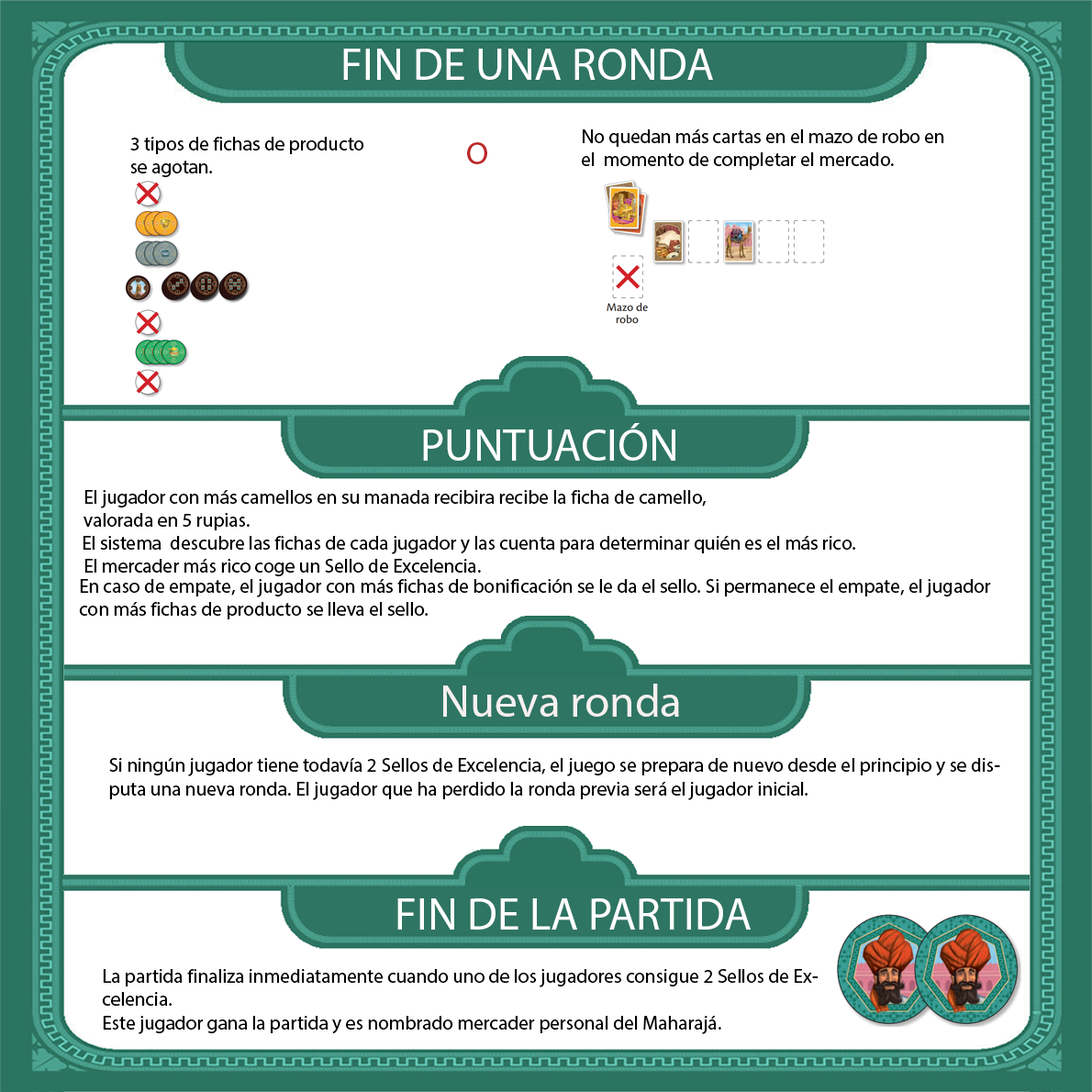
<style>
.page{position:relative;width:1092px;height:1092px;background:#ffffff}
.page>*{position:absolute;margin:0}
.t1{font:45.3px "MyriadHebrew-Regular";color:#ffffff}
.t2{font:19.4px "MyriadHebrew-Regular";color:#010101}
.t3{font:19.4px "MyriadHebrew-Regular";color:#000000}
.t4{font:32.4px "MyriadHebrew-Regular";color:#bd2727}
.t5{font:45.3px "MyriadHebrew-Regular";color:#f6f0f0}
</style>
<div class="page">
<p class="t1" style="left:343px;top:49px;width:370px;height:31px">FIN DE UNA RONDA</p>
<p class="t2" style="left:130px;top:137px;width:234px;height:40px;text-align:right">3 tipos de fichas de producto se agotan.</p>
<p class="t3" style="left:582px;top:129px;width:362px;height:41px;text-align:right">No quedan más cartas en el mazo de robo en el  momento de completar el mercado.</p>
<p class="t4" style="left:467px;top:142px;width:20px;height:22px">O</p>
<p class="t1" style="left:423px;top:423px;width:252px;height:38px">PUNTUACIÓN</p>
<p class="t3" style="left:84px;top:490px;width:622px;height:40px;text-align:right">El jugador con más camellos en su manada recibira recibe la ficha de camello,<br>valorada en 5 rupias.</p>
<p class="t3" style="left:83px;top:536px;width:772px;height:18px">El sistema  descubre las fichas de cada jugador y las cuenta para determinar quién es el más rico.</p>
<p class="t3" style="left:84px;top:559px;width:397px;height:17px">El mercader más rico coge un Sello de Excelencia.</p>
<p class="t3" style="left:79px;top:579px;width:912px;height:40px;text-align:right">En caso de empate, el jugador con más fichas de bonificación se le da el sello. Si permanece el empate, el jugador con más fichas de producto se lleva el sello.</p>
<p class="t5" style="left:443px;top:684px;width:236px;height:33px">Nueva ronda</p>
<p class="t3" style="left:109px;top:758px;width:891px;height:42px;text-align:right">Si ningún jugador tiene todavía 2 Sellos de Excelencia, el juego se prepara de nuevo desde el principio y se disputa una nueva ronda. El jugador que ha perdido la ronda previa será el jugador inicial.</p>
<p class="t1" style="left:397px;top:898px;width:354px;height:32px">FIN DE LA PARTIDA</p>
<p class="t3" style="left:102px;top:969px;width:716px;height:65px;text-align:right">La partida finaliza inmediatamente cuando uno de los jugadores consigue 2 Sellos de Excelencia.<br>Este jugador gana la partida y es nombrado mercader personal del Maharajá.</p>
</div>
